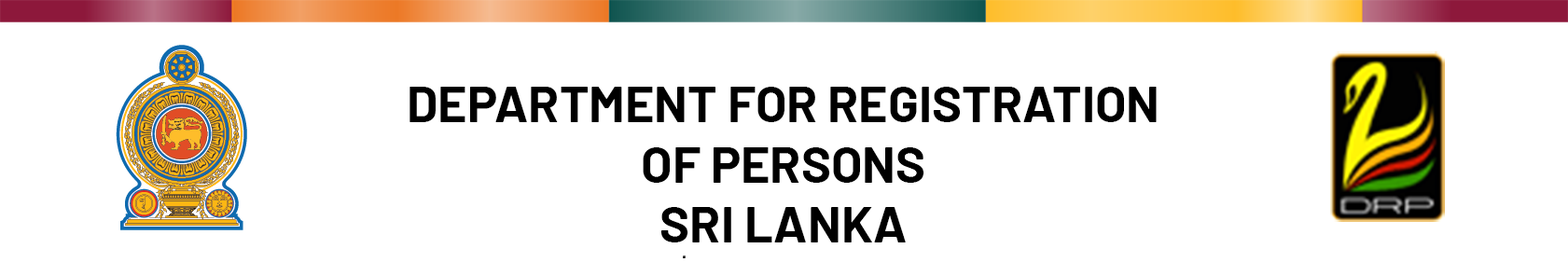
<style>
.page{position:relative;width:1568px;height:276px;background:#ffffff}
.page>*{position:absolute;margin:0}
.t1{font:50.4px "Barlow-Bold";color:#000000;text-transform:uppercase}
</style>
<div class="page">
<p class="t1" style="left:409px;top:87px;width:748px;height:156px;text-align:center">Department for Registration of Persons<br>SRI LANKA</p>
</div>
